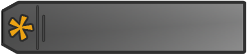
<style>
.page{position:relative;width:247px;height:55px}
.page>*{position:absolute;margin:0}
.t1{font:68px "PalatinoLinotype-Roman";color:#eda314}
</style>
<div class="page">
<p class="t1" style="left:9px;top:16px;width:24px;height:24px">*</p>
</div>
